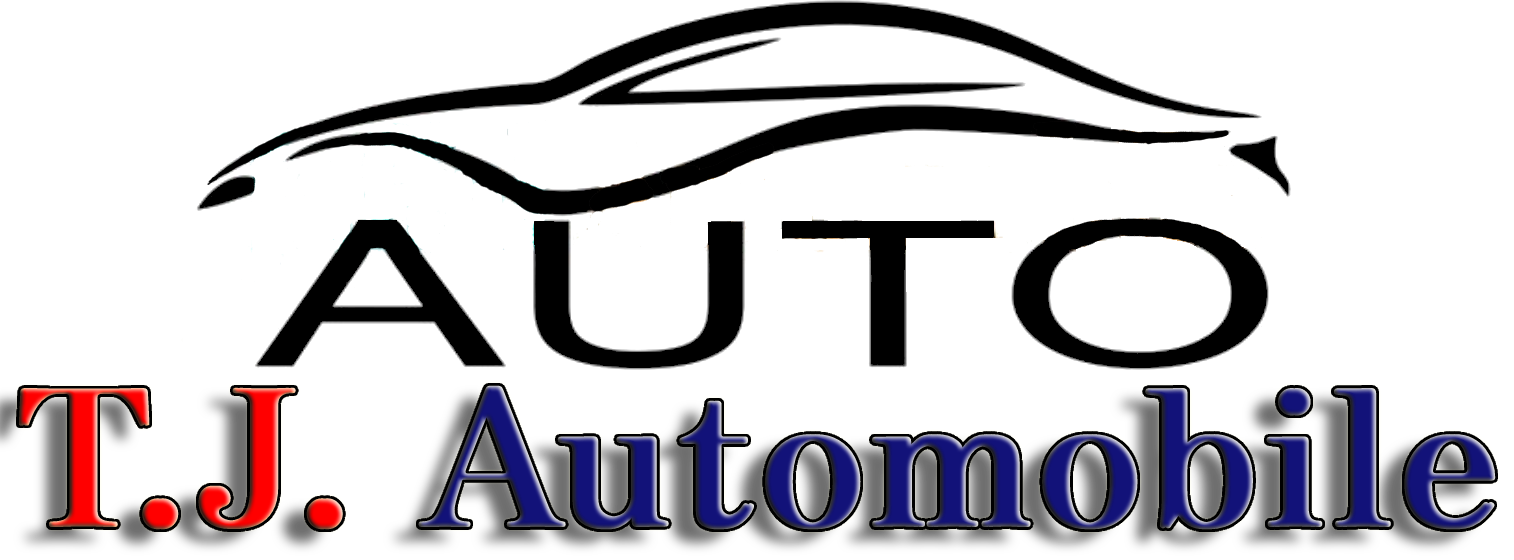
<style>
.page{position:relative;width:1514px;height:560px;background:#ffffff}
.page>*{position:absolute;margin:0}
.t1{font:191.5px "ZenAntiqueSoft-Regular";font-weight:bold}
</style>
<div class="page">
<p class="t1" style="left:18px;top:385px;width:1478px;height:145px">T.J. Automobile</p>
</div>
